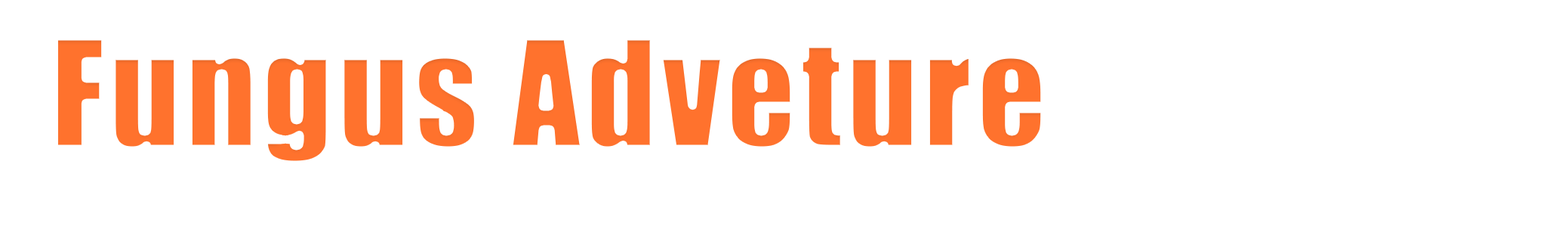
<style>
.page{position:relative;width:1568px;height:242px;background:#ffffff}
.page>*{position:absolute;margin:0}
.t1{font:138.9px "Impact";font-weight:bold}
</style>
<div class="page">
<p class="t1" style="left:54px;top:35px;width:992px;height:130px">Fungus Adveture</p>
</div>
